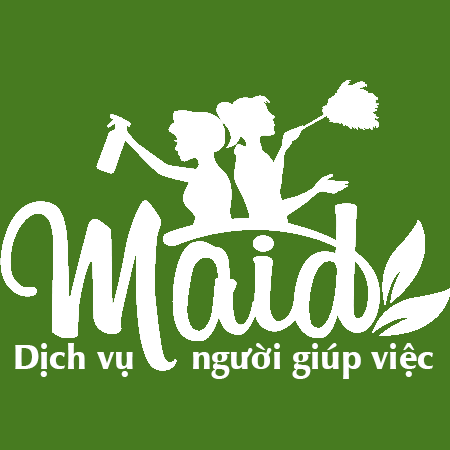
<style>
.page{position:relative;width:450px;height:450px;background:#477b20}
.page>*{position:absolute;margin:0}
.t1{font:35px "UVNNhanNang";color:#ffffff}
</style>
<div class="page">
<p class="t1" style="left:15px;top:343px;width:118px;height:34px">Dịch vụ</p>
<p class="t1" style="left:193px;top:343px;width:240px;height:36px">người giúp việc</p>
</div>
